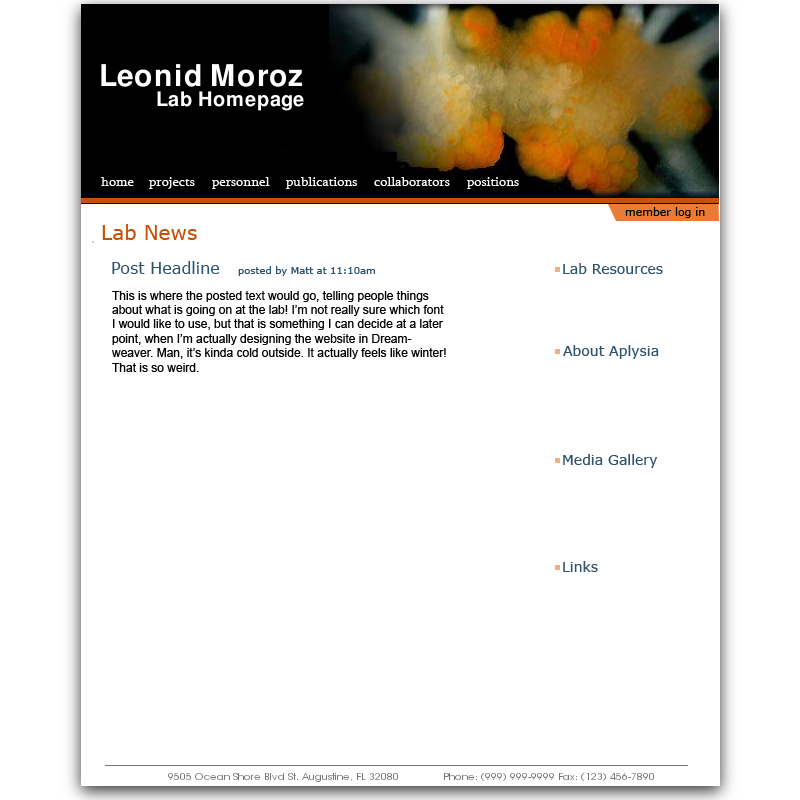
<style>
.page{position:relative;width:800px;height:800px;background:#ffffff}
.page>*{position:absolute;margin:0}
.t1{font:14px "Sylfaen";color:#ffffff}
.t2{font:11px "Verdana";color:#000000}
.t3{font:20px "Verdana";color:#c85002}
.t4{font:16px "Verdana";color:#2d536e}
.t5{font:10px "Verdana";color:#2d536e}
.t6{font:14px "Verdana";color:#2e536e}
.t7{font:12px "ArialMT";color:#000000}
</style>
<div class="page">
<p class="t1" style="left:101px;top:177px;width:33px;height:9px">home</p>
<p class="t1" style="left:149px;top:177px;width:46px;height:12px">projects</p>
<p class="t1" style="left:212px;top:177px;width:58px;height:12px">personnel</p>
<p class="t1" style="left:286px;top:177px;width:71px;height:12px">publications</p>
<p class="t1" style="left:374px;top:177px;width:76px;height:9px">collaborators</p>
<p class="t1" style="left:467px;top:177px;width:52px;height:12px">positions</p>
<p class="t2" style="left:625px;top:207px;width:80px;height:11px">member log in</p>
<p class="t3" style="left:102px;top:224px;width:95px;height:16px">Lab News</p>
<p class="t4" style="left:112px;top:261px;width:108px;height:13px">Post Headline</p>
<p class="t5" style="left:238px;top:266px;width:137px;height:10px">posted by Matt at 11:10am</p>
<p class="t6" style="left:563px;top:263px;width:100px;height:11px">Lab Resources</p>
<p class="t7" style="left:112px;top:291px;width:334px;height:81px">This is where the posted text would go, telling people things about what is going on at the lab! I’m not really sure which font I would like to use, but that is something I can decide at a later point, when I’m actually designing the website in Dreamweaver. Man, it’s kinda cold outside. It actually feels like winter! That is so weird.</p>
<p class="t6" style="left:563px;top:345px;width:96px;height:14px">About Aplysia</p>
<p class="t6" style="left:563px;top:454px;width:95px;height:14px">Media Gallery</p>
<p class="t6" style="left:563px;top:561px;width:35px;height:11px">Links</p>
</div>
